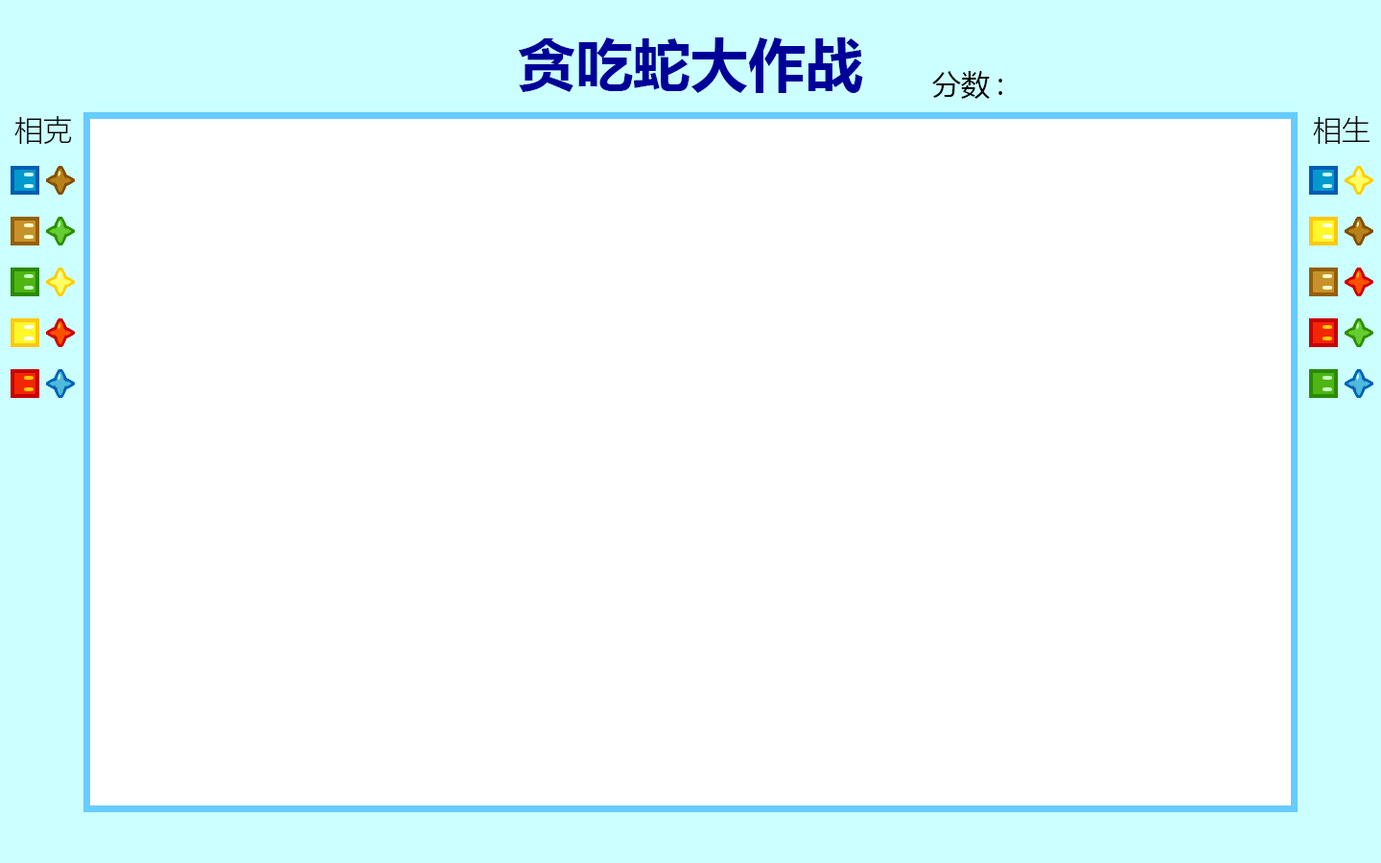
<style>
.page{position:relative;width:1381px;height:863px;background:#ffffff}
.page>*{position:absolute;margin:0}
.t1{font:57.6px "MicrosoftYaHei-Bold";color:#000099}
.t2{font:28.8px "MicrosoftYaHei";color:#000000}
.t3{font:28.8px "MicrosoftYaHeiLight";color:#000000}
</style>
<div class="page">
<p class="t1" style="left:519px;top:37px;width:344px;height:56px">贪吃蛇大作战</p>
<p class="t2" style="left:932px;top:71px;width:70px;height:28px">分数:</p>
<p class="t3" style="left:14px;top:116px;width:58px;height:28px">相克</p>
<p class="t3" style="left:1313px;top:116px;width:58px;height:28px">相生</p>
</div>
